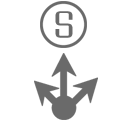
<style>
.page{position:relative;width:128px;height:128px;background:#ffffff}
.page>*{position:absolute;margin:0}
.t1{font:30px "TVpl";letter-spacing:0.05em;color:#6a6a6a}
</style>
<div class="page">
<p class="t1" style="left:55px;top:11px;width:18px;height:27px">S</p>
</div>
